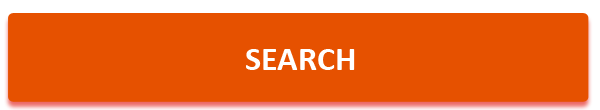
<style>
.page{position:relative;width:600px;height:110px;background:#e65100}
.page>*{position:absolute;margin:0}
.t1{font:34.1px "Calibri-Bold";color:#ffffff}
</style>
<div class="page">
<p class="t1" style="left:246px;top:49px;width:109px;height:21px">SEARCH</p>
</div>
